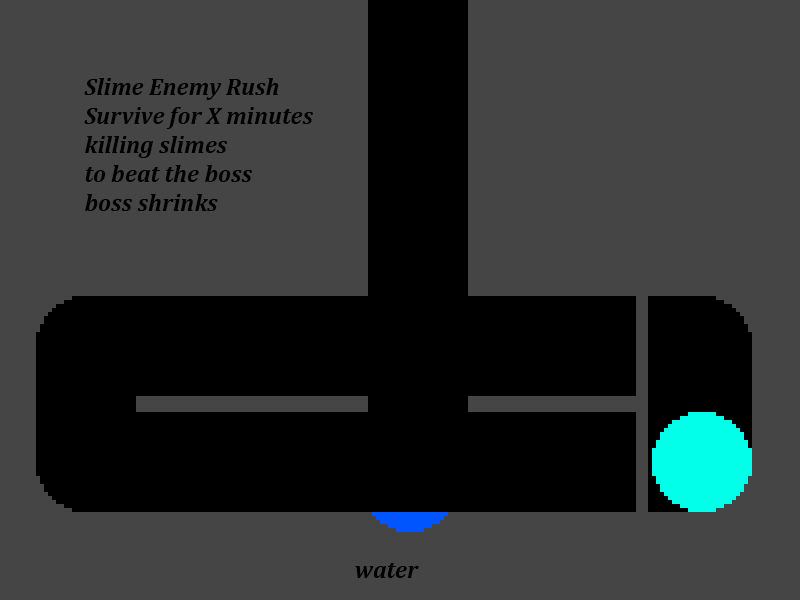
<style>
.page{position:relative;width:800px;height:600px;background:#454545}
.page>*{position:absolute;margin:0}
.t1{font:24px "Cambria-BoldItalic";color:#000000}
</style>
<div class="page">
<p class="t1" style="left:84px;top:78px;width:229px;height:133px">Slime Enemy Rush<br>Survive for X minutes <br>killing slimes<br>to beat the boss<br>boss shrinks</p>
<p class="t1" style="left:355px;top:563px;width:64px;height:15px">water</p>
</div>
